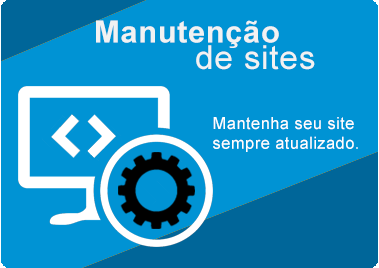
<style>
.page{position:relative;width:379px;height:268px;background:#0093d4}
.page>*{position:absolute;margin:0}
.t1{font:30.8px "Arial-BoldMT";letter-spacing:0.025em;color:#f2f2f2}
.t2{font:33.2px "ArialMT";letter-spacing:0.025em;color:#f2f2f2}
.t3{font:16.5px "ArialMT";letter-spacing:0.025em;color:#ffffff}
</style>
<div class="page">
<p class="t1" style="left:96px;top:20px;width:183px;height:28px">Manutenção</p>
<p class="t2" style="left:196px;top:45px;width:119px;height:25px">de sites</p>
<p class="t3" style="left:213px;top:117px;width:145px;height:35px;text-align:center">Mantenha seu site <br>sempre atualizado.</p>
</div>
